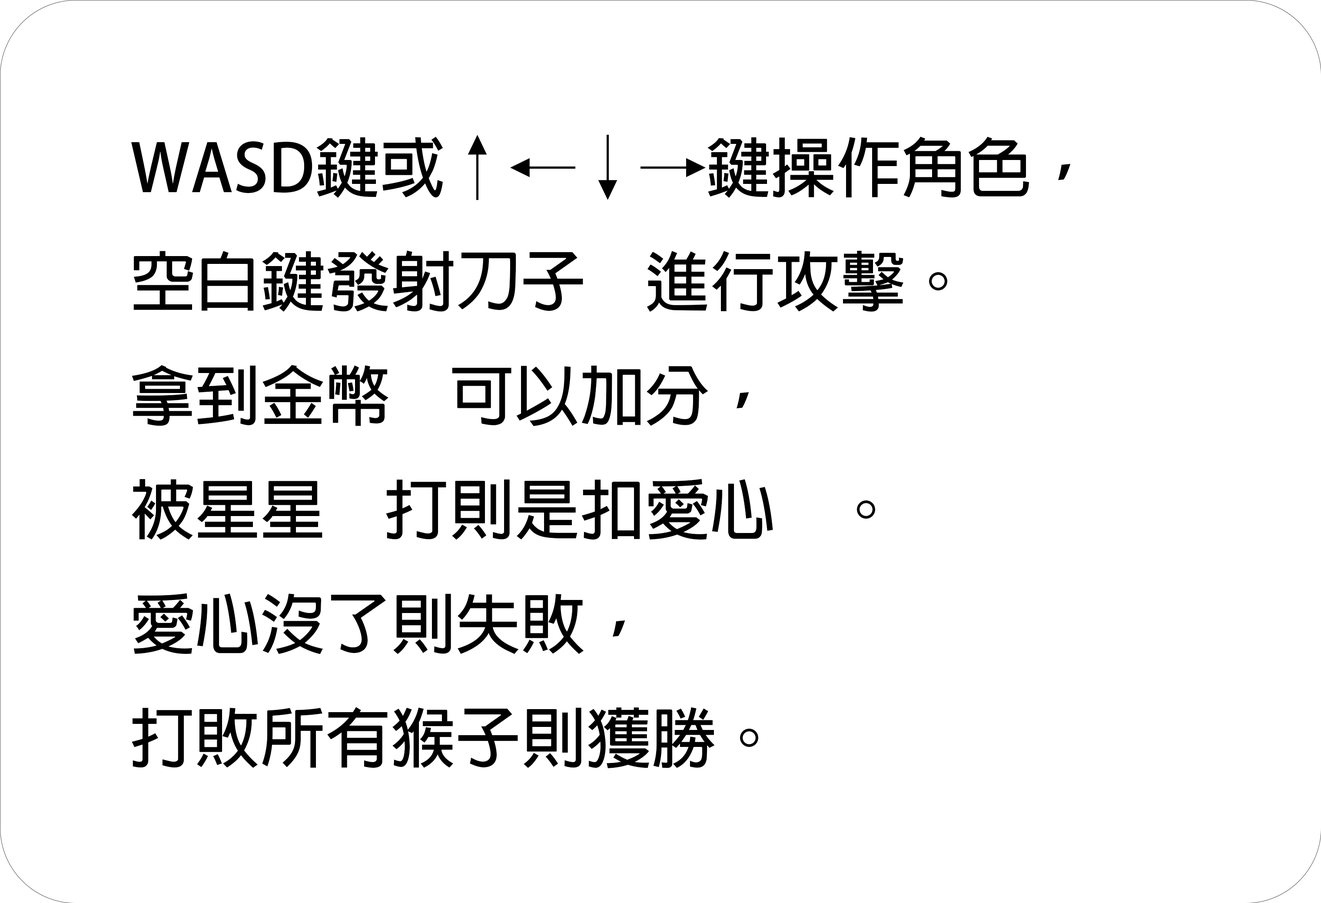
<style>
.page{position:relative;width:1321px;height:903px;background:#ffffff}
.page>*{position:absolute;margin:0}
.t1{font:65.2px "AdobeFanHeitiStd-Bold";color:#000000}
</style>
<div class="page">
<p class="t1" style="left:131px;top:134px;width:940px;height:634px">WASD鍵或↑←↓→鍵操作角色，<br>空白鍵發射刀子    進行攻擊。<br>拿到金幣    可以加分，<br>被星星    打則是扣愛心    。<br>愛心沒了則失敗，<br>打敗所有猴子則獲勝。</p>
</div>
